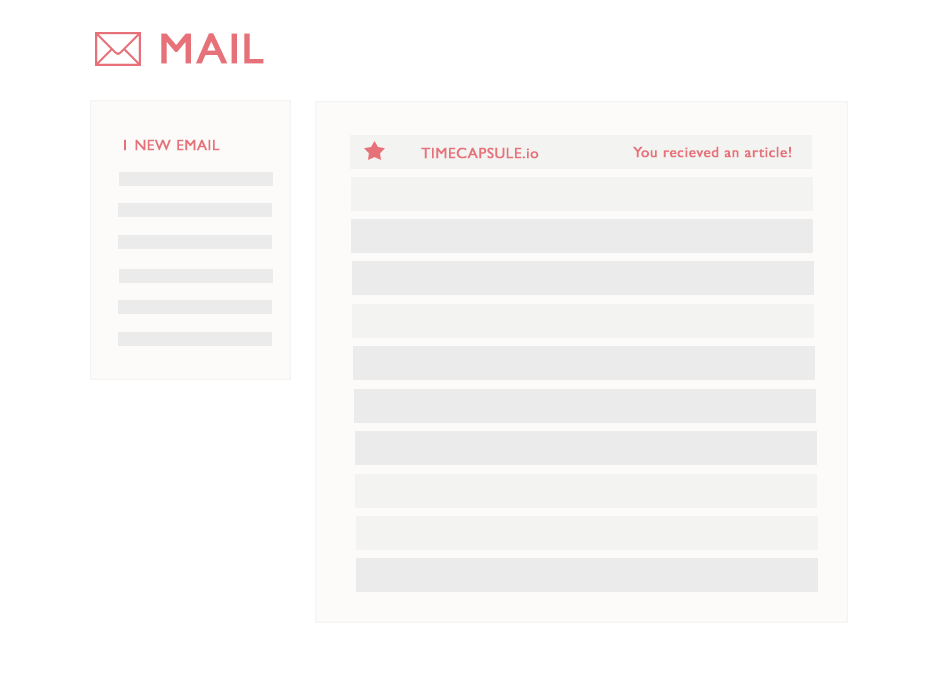
<style>
.page{position:relative;width:950px;height:674px;background:#ffffff}
.page>*{position:absolute;margin:0}
.t1{font:43.3px "GillSans";letter-spacing:0.025em;color:#e67179;font-weight:bold;scale:1.03 1}
.t2{font:14.9px "GillSans";letter-spacing:0.025em;color:#e67179;font-weight:bold}
</style>
<div class="page">
<p class="t1" style="left:161px;top:33px;width:103px;height:31px">MAIL</p>
<p class="t2" style="left:124px;top:139px;width:96px;height:12px">1 NEW EMAIL</p>
<p class="t2" style="left:421px;top:147px;width:118px;height:12px">TIMECAPSULE.io</p>
<p class="t2" style="left:633px;top:146px;width:159px;height:12px">You recieved an article!</p>
</div>
